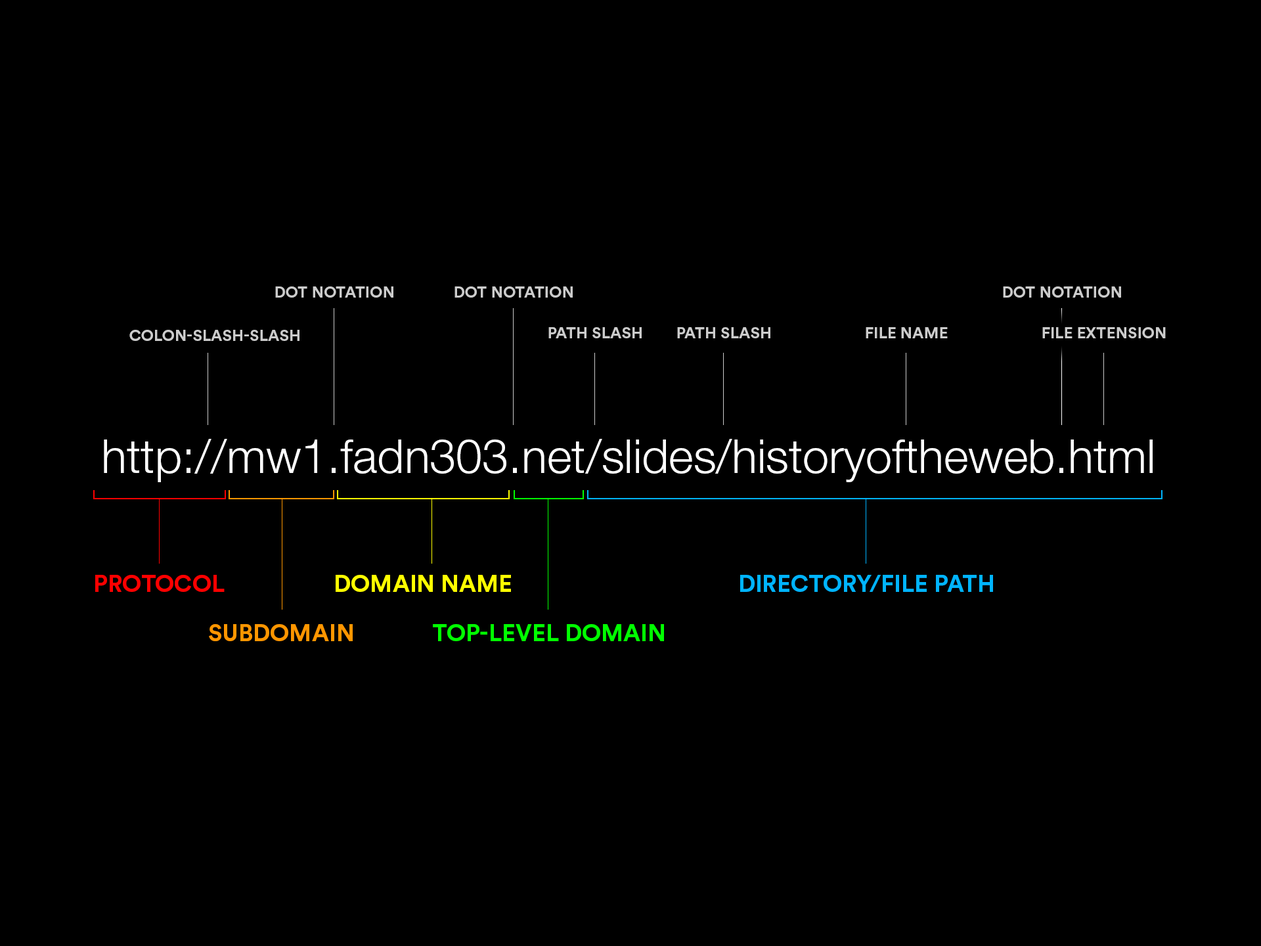
<style>
.page{position:relative;width:1261px;height:946px;background:#000000}
.page>*{position:absolute;margin:0}
.t1{font:15.8px "CircularStd-Bold";color:#cccccc;text-transform:uppercase}
.t2{font:47.3px "HelveticaNeueLTStd-Lt";color:#ffffff}
.t3{font:23.6px "CircularStd-Bold";color:#ff0000;text-transform:uppercase}
.t4{font:23.6px "CircularStd-Bold";color:#ffff00;text-transform:uppercase}
.t5{font:23.6px "CircularStd-Bold";color:#00b4ff;text-transform:uppercase}
.t6{font:23.6px "CircularStd-Bold";color:#ff9600;text-transform:uppercase}
.t7{font:23.6px "CircularStd-Bold";color:#00ff00;text-transform:uppercase}
</style>
<div class="page">
<p class="t1" style="left:275px;top:286px;width:118px;height:11px">DOT NOTATION</p>
<p class="t1" style="left:454px;top:286px;width:119px;height:11px">DOT NOTATION</p>
<p class="t1" style="left:1003px;top:286px;width:118px;height:11px">DOT NOTATION</p>
<p class="t1" style="left:129px;top:330px;width:170px;height:11px">colon-slash-slash</p>
<p class="t1" style="left:548px;top:327px;width:94px;height:11px">PATH SLASH</p>
<p class="t1" style="left:677px;top:327px;width:93px;height:11px">PATH SLASH</p>
<p class="t1" style="left:866px;top:327px;width:82px;height:11px">FILE NAME</p>
<p class="t1" style="left:1042px;top:327px;width:124px;height:11px">FILE Extension</p>
<p class="t2" style="left:104px;top:439px;width:1049px;height:43px">http://mw1.fadn303.net/slides/historyoftheweb.html</p>
<p class="t3" style="left:95px;top:575px;width:130px;height:17px">PROTOCOL</p>
<p class="t4" style="left:336px;top:575px;width:175px;height:17px">DOMAIN NAME</p>
<p class="t5" style="left:740px;top:575px;width:253px;height:17px">directory/file path</p>
<p class="t6" style="left:209px;top:624px;width:144px;height:17px">SUBDOMAIN</p>
<p class="t7" style="left:433px;top:624px;width:231px;height:17px">Top-level domain</p>
</div>
